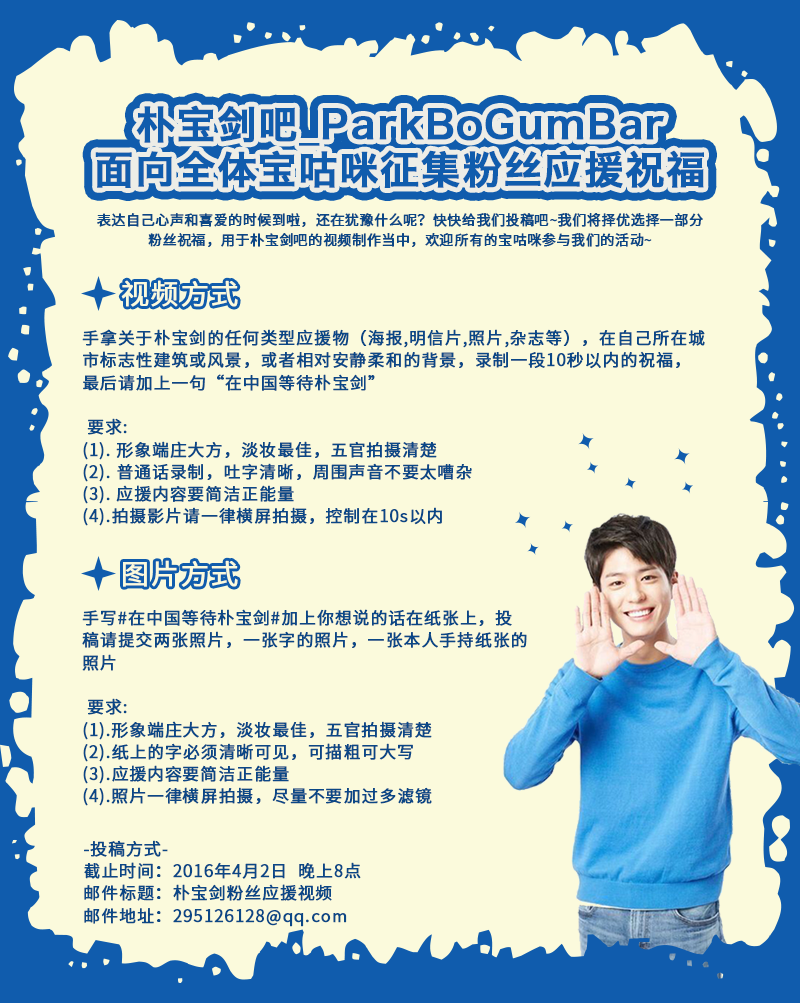
<style>
.page{position:relative;width:800px;height:1003px;background:#fbfadc}
.page>*{position:absolute;margin:0}
.t1{font:38.9px/44.5px "HiraginoSansGB-W6";letter-spacing:0.024em;color:#105cad;font-weight:bold}
.t2{font:13.9px/19.5px "SourceHanSansCN-Normal";letter-spacing:0.024em;color:#0b4786;font-weight:bold}
.t3{font:27.8px "SourceHanSansCN-Normal";letter-spacing:0.044em;color:#fbfadc;font-weight:bold}
.t4{font:16.7px/22.3px "SourceHanSansCN-Normal";letter-spacing:0.044em;color:#0b4786;font-weight:bold}
</style>
<div class="page">
<p class="t1" style="left:95px;top:105px;width:609px;height:83px;text-align:center">朴宝剑吧_ParkBoGumBar<br>面向全体宝咕咪征集粉丝应援祝福</p>
<p class="t2" style="left:97px;top:213px;width:606px;height:34px;text-align:center">表达自己心声和喜爱的时候到啦，还在犹豫什么呢？快快给我们投稿吧~我们将择优选择一部分粉丝祝福，用于朴宝剑吧的视频制作当中，欢迎所有的宝咕咪参与我们的活动~</p>
<p class="t3" style="left:121px;top:280px;width:117px;height:27px">视频方式</p>
<p class="t4" style="left:82px;top:329px;width:623px;height:197px">手拿关于朴宝剑的任何类型应援物（海报,明信片,照片,杂志等），在自己所在城市标志性建筑或风景，或者相对安静柔和的背景，录制一段10秒以内的祝福，最后请加上一句“在中国等待朴宝剑”<br> <br> 要求:<br>(1). 形象端庄大方，淡妆最佳，五官拍摄清楚<br>(2). 普通话录制，吐字清晰，周围声音不要太嘈杂<br>(3). 应援内容要简洁正能量<br>(4).拍摄影片请一律横屏拍摄，控制在10s以内</p>
<p class="t3" style="left:123px;top:560px;width:115px;height:27px">图片方式</p>
<p class="t4" style="left:82px;top:609px;width:445px;height:197px">手写#在中国等待朴宝剑#加上你想说的话在纸张上，投稿请提交两张照片，一张字的照片，一张本人手持纸张的照片<br><br> 要求:<br>(1).形象端庄大方，淡妆最佳，五官拍摄清楚<br>(2).纸上的字必须清晰可见，可描粗可大写<br>(3).应援内容要简洁正能量<br>(4).照片一律横屏拍摄，尽量不要加过多滤镜</p>
<p class="t4" style="left:84px;top:840px;width:277px;height:87px">-投稿方式-<br>截止时间：2016年4月2日  晚上8点<br>邮件标题：朴宝剑粉丝应援视频<br>邮件地址：295126128@qq.com</p>
</div>
